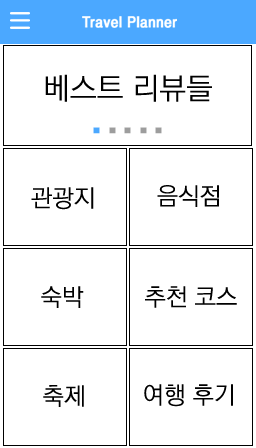
<style>
.page{position:relative;width:256px;height:448px;background:#ffffff}
.page>*{position:absolute;margin:0}
.t1{font:30px/30px "YGO520";letter-spacing:-0.005em;color:#000000}
.t2{font:48px/30px "YGO520";letter-spacing:-0.005em;color:#4ba8ff;font-weight:bold}
.t3{font:48px/30px "YGO520";letter-spacing:-0.005em;color:#9d9d9d;font-weight:bold}
.t4{font:24px "YGO520";letter-spacing:-0.005em;color:#000000}
</style>
<div class="page">
<p class="t1" style="left:45px;top:74px;width:167px;height:60px;text-align:center">베스트 리뷰들<br><span class="t2">.</span><span class="t3">....</span></p>
<p class="t4" style="left:157px;top:185px;width:62px;height:22px">음식점</p>
<p class="t4" style="left:31px;top:187px;width:63px;height:23px">관광지</p>
<p class="t4" style="left:41px;top:286px;width:43px;height:22px">숙박</p>
<p class="t4" style="left:145px;top:286px;width:92px;height:22px">추천 코스</p>
<p class="t4" style="left:43px;top:385px;width:41px;height:22px">축제</p>
<p class="t4" style="left:144px;top:384px;width:89px;height:23px">여행 후기</p>
</div>
